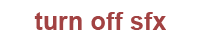
<style>
.page{position:relative;width:200px;height:45px;background:#ffffff}
.page>*{position:absolute;margin:0}
.t1{font:25px "Arial-BoldMT";color:#a24242}
</style>
<div class="page">
<p class="t1" style="left:34px;top:12px;width:132px;height:18px">turn off sfx</p>
</div>
